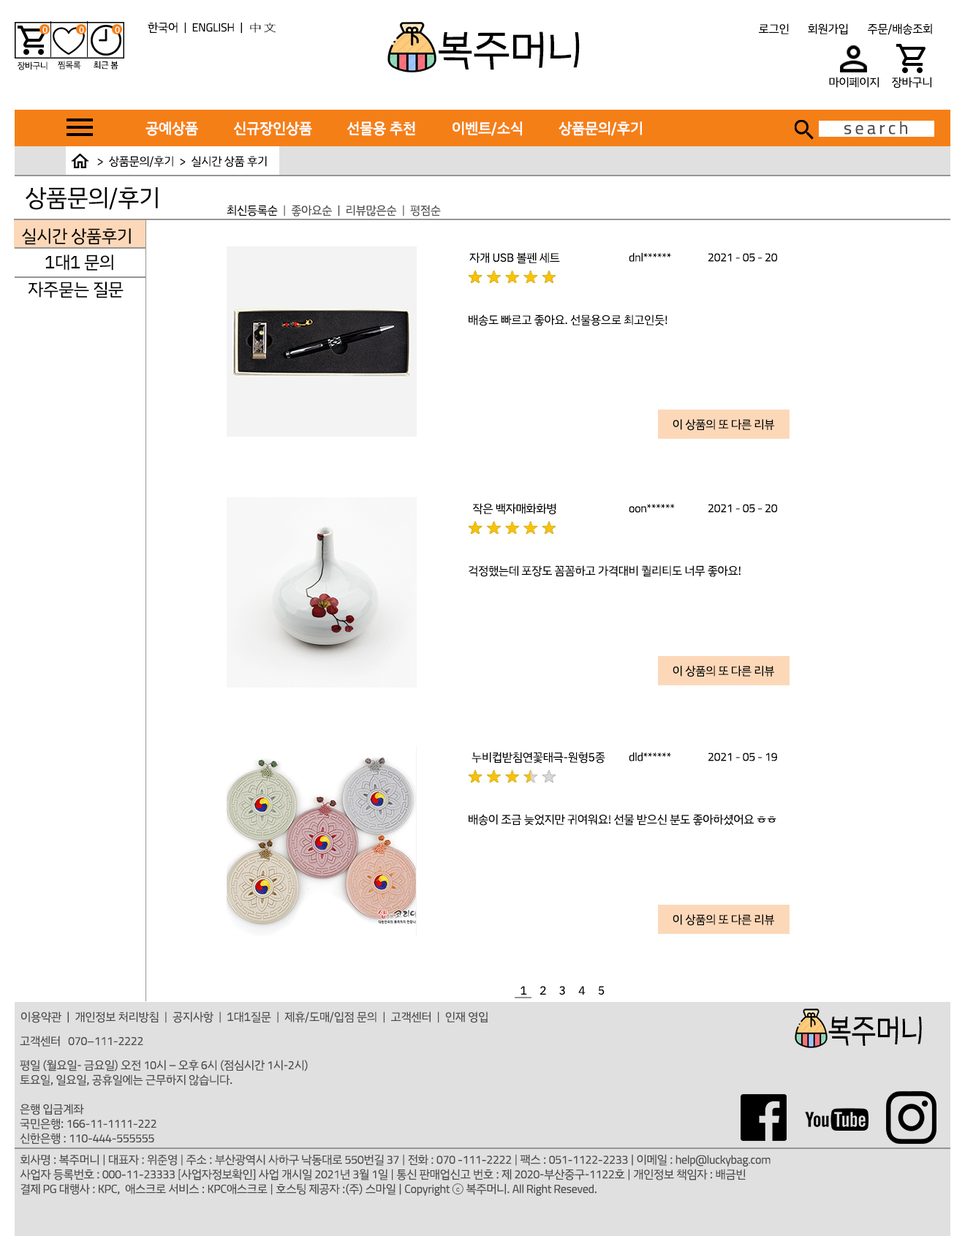
<style>
.page{position:relative;width:965px;height:1236px;background:#ffffff}
.page>*{position:absolute;margin:0}
.t1{font:8.8px "IBMPlexSansKR";letter-spacing:-0.02em;color:#ffffff}
.t2{font:11.7px "TitilliumWeb-Regular";letter-spacing:-0.02em;color:#000000}
.t3{font:11.7px "IBMPlexSansKR";letter-spacing:-0.02em;color:#000000}
.t4{font:11.7px "Terminal";letter-spacing:-0.02em;color:#000000}
.t5{font:31.4px "IBMPlexSansKR";letter-spacing:-0.02em;color:#000000}
.t6{font:34.4px "IBMPlexSansKR";letter-spacing:-0.02em;color:#000000}
.t7{font:8.8px "IBMPlexSansKR";letter-spacing:-0.02em;color:#000000}
.t8{font:14.6px "IBMPlexSansKR";letter-spacing:-0.02em;color:#ffffff;font-weight:bold}
.t9{font:17.5px "TitilliumWeb-Regular";letter-spacing:-0.02em;color:#4d4d4d}
.t10{font:11.7px "IBMPlexSansKR";letter-spacing:-0.02em;color:#010101}
.t11{font:24.1px "IBMPlexSansKR";letter-spacing:-0.02em;color:#000000}
.t12{font:11.7px "IBMPlexSansKR";letter-spacing:-0.02em;color:#4d4d4d}
.t13{font:17.5px "IBMPlexSansKR";letter-spacing:-0.02em;color:#000000}
.t14{font:24.4px "IBMPlexSansKR";letter-spacing:-0.02em;color:#000000;scale:0.85 1}
.t15{font:26.7px "IBMPlexSansKR";letter-spacing:-0.02em;color:#000000;scale:0.85 1}
.t16{font:11.7px "TitilliumWeb-Regular";letter-spacing:-0.02em;color:#4d4d4d}
.t17{font:11.7px/14.6px "IBMPlexSansKR";letter-spacing:-0.02em;color:#4d4d4d}
.t18{font:11.7px/14.6px "TitilliumWeb-Regular";letter-spacing:-0.02em;color:#4d4d4d}
</style>
<div class="page">
<p class="t1" style="left:42px;top:26px;width:6px;height:8px">0</p>
<p class="t1" style="left:79px;top:26px;width:5px;height:8px">0</p>
<p class="t1" style="left:115px;top:26px;width:5px;height:8px">0</p>
<p class="t2" style="left:148px;top:22px;width:128px;height:12px"><span class="t3">한국어  |  </span>ENGLISH<span class="t3">  |  </span><span class="t4">中文</span></p>
<p class="t3" style="left:759px;top:23px;width:30px;height:11px">로그인</p>
<p class="t3" style="left:808px;top:23px;width:40px;height:11px">회원가입</p>
<p class="t3" style="left:868px;top:23px;width:64px;height:12px">주문/배송조회</p>
<p class="t5" style="left:439px;top:31px;width:141px;height:39px"><span class="t6">            <br>            <br>             </span>복주머니</p>
<p class="t7" style="left:18px;top:61px;width:30px;height:9px">장바구니</p>
<p class="t7" style="left:58px;top:61px;width:23px;height:8px">찜목록</p>
<p class="t7" style="left:94px;top:61px;width:24px;height:8px">최근 봄</p>
<p class="t3" style="left:829px;top:77px;width:50px;height:11px">마이페이지</p>
<p class="t3" style="left:892px;top:77px;width:39px;height:11px">장바구니</p>
<p class="t8" style="left:145px;top:121px;width:53px;height:15px">공예상품</p>
<p class="t8" style="left:234px;top:121px;width:78px;height:15px">신규장인상품</p>
<p class="t8" style="left:347px;top:121px;width:68px;height:15px">선물용 추천</p>
<p class="t8" style="left:453px;top:121px;width:69px;height:15px">이벤트/소식</p>
<p class="t8" style="left:559px;top:121px;width:83px;height:15px">상품문의/후기</p>
<p class="t9" style="left:844px;top:121px;width:63px;height:14px">s e a r c h</p>
<p class="t10" style="left:97px;top:156px;width:170px;height:11px">&gt;  상품문의/후기  &gt;  실시간 상품 후기</p>
<p class="t11" style="left:26px;top:187px;width:132px;height:23px">상품문의/후기</p>
<p class="t12" style="left:227px;top:205px;width:214px;height:11px"><span class="t3">최신등록순 </span> |  좋아요순  |  리뷰많은순  |  평점순</p>
<p class="t13" style="left:22px;top:228px;width:109px;height:17px">실시간 상품후기</p>
<p class="t13" style="left:45px;top:254px;width:68px;height:17px">1대1 문의</p>
<p class="t3" style="left:469px;top:252px;width:91px;height:12px">자개 USB 볼펜 세트</p>
<p class="t2" style="left:629px;top:252px;width:42px;height:10px">dnl******</p>
<p class="t2" style="left:708px;top:253px;width:69px;height:9px">2021 - 05 - 20</p>
<p class="t13" style="left:28px;top:281px;width:96px;height:17px">자주묻는 질문</p>
<p class="t3" style="left:469px;top:314px;width:199px;height:12px">배송도 빠르고 좋아요. 선물용으로 최고인듯!</p>
<p class="t3" style="left:673px;top:419px;width:101px;height:12px">이 상품의 또 다른 리뷰</p>
<p class="t3" style="left:472px;top:503px;width:84px;height:12px">작은 백자매화화병</p>
<p class="t2" style="left:629px;top:504px;width:46px;height:9px">oon******</p>
<p class="t2" style="left:708px;top:504px;width:69px;height:9px">2021 - 05 - 20</p>
<p class="t3" style="left:469px;top:565px;width:272px;height:12px">걱정했는데 포장도 꼼꼼하고 가격대비 퀄리티도 너무 좋아요!</p>
<p class="t3" style="left:673px;top:665px;width:101px;height:12px">이 상품의 또 다른 리뷰</p>
<p class="t3" style="left:472px;top:752px;width:133px;height:11px">누비컵받침연꽃태극-원형5종</p>
<p class="t2" style="left:629px;top:752px;width:42px;height:9px">dld******</p>
<p class="t2" style="left:708px;top:752px;width:69px;height:9px">2021 - 05 - 19</p>
<p class="t3" style="left:469px;top:814px;width:307px;height:11px">배송이 조금 늦었지만 귀여워요! 선물 받으신 분도 좋아하셨어요 ㅎㅎ</p>
<p class="t3" style="left:673px;top:914px;width:101px;height:12px">이 상품의 또 다른 리뷰</p>
<p class="t3" style="left:521px;top:986px;width:84px;height:9px">1     2     3     4     5</p>
<p class="t12" style="left:21px;top:1011px;width:467px;height:12px">이용약관  |  개인정보 처리방침  |  공지사항  |  1대1질문  |  제휴/도매/입점 문의  |  고객센터  |  인재 영입</p>
<p class="t14" style="left:828px;top:1016px;width:94px;height:29px"><span class="t15">            <br>            <br>             </span>복주머니</p>
<p class="t16" style="left:20px;top:1035px;width:123px;height:12px"><span class="t12">고객센터   </span>070–111-2222</p>
<p class="t17" style="left:20px;top:1059px;width:288px;height:85px">평일 (월요일- 금요일) 오전 <span class="t18">10</span>시 – 오후<span class="t18"> 6</span>시 (점심시간 <span class="t18">1</span>시-<span class="t18">2</span>시)<br>토요일, 일요일, 공휴일에는 근무하지 않습니다.<br><br>은행 입금계좌<br>국민은행: <span class="t18">166-11-1111-222<br></span>신한은행 : <span class="t18">110-444-555555</span></p>
<p class="t17" style="left:20px;top:1154px;width:751px;height:41px">회사명 : 복주머니 | 대표자 : 위준영 | 주소 : 부산광역시 사하구 낙동대로 <span class="t18">550</span>번길 <span class="t18">37</span> | 전화 : <span class="t18">070 -111-2222</span> | 팩스 : <span class="t18">051-1122-2233</span> | 이메일 : <span class="t18">help@luckybag.com<br></span>사업자 등록번호 : <span class="t18">000-11-23333</span> [사업자정보확인] 사업 개시일 <span class="t18">2021</span>년 <span class="t18">3</span>월<span class="t18"> 1</span>일 | 통신 판매업신고 번호 : 제 <span class="t18">2020</span>-부산중구-<span class="t18">1122</span>호 | 개인정보 책임자 : 배금빈<br>결제<span class="t18"> PG</span> 대행사 : <span class="t18">KPC</span>,  애스크로 서비스 : <span class="t18">KPC</span>애스크로 | 호스팅 제공자 :(주) 스마일 | <span class="t18">Copyright </span>ⓒ 복주머니. <span class="t18">All Right Reseved</span>.</p>
</div>
